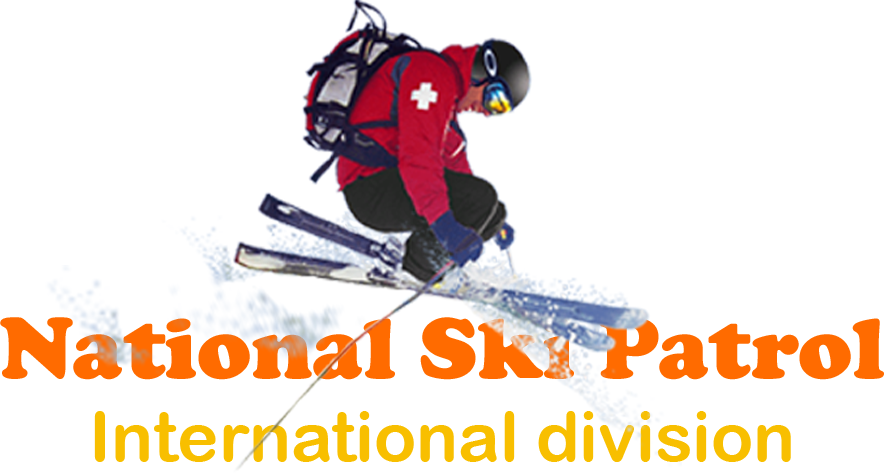
<style>
.page{position:relative;width:884px;height:474px;background:#ffffff}
.page>*{position:absolute;margin:0}
.t1{font:69.1px "ArialRoundedMTBold";color:#f8bf00}
.t2{font:89.6px "CooperBlack";color:#ff6b00}
</style>
<div class="page">
<p class="t1" style="left:0px;top:317px;width:884px;height:145px;text-align:center"><span class="t2">National Ski Patrol<br></span>International division</p>
</div>
